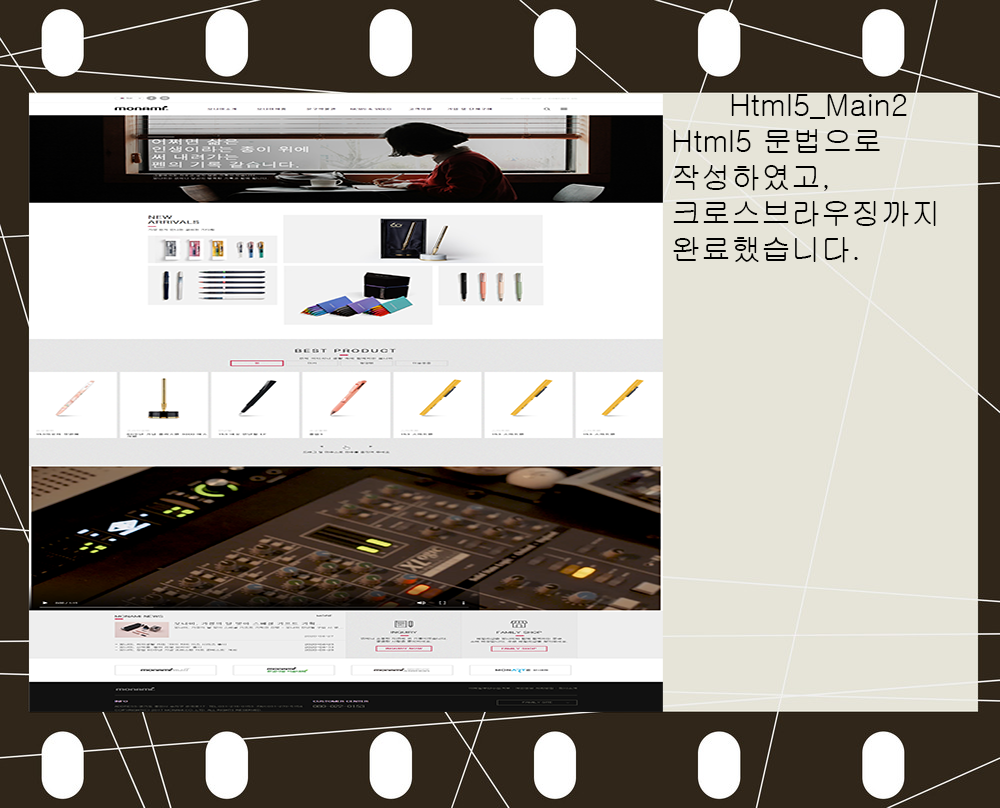
<style>
.page{position:relative;width:1000px;height:808px}
.page>*{position:absolute;margin:0}
.t1{font:30px "Gulim";color:#000000}
</style>
<div class="page">
<p class="t1" style="left:673px;top:94px;width:263px;height:169px;text-align:center">Html5_Main2<br> Html5 문법으로                  <br> 작성하였고,<br> 크로스브라우징까지 <br> 완료했습니다.</p>
</div>
